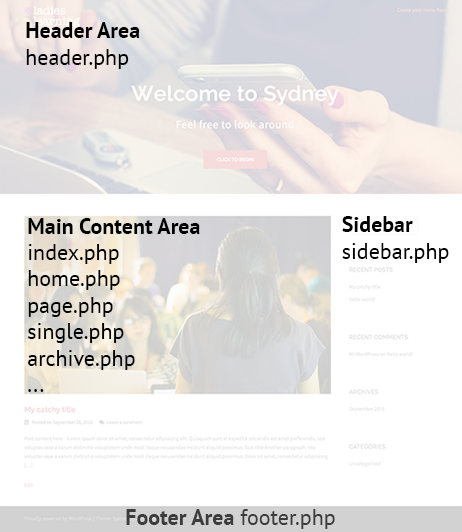
<style>
.page{position:relative;width:462px;height:532px;background:#ffffff}
.page>*{position:absolute;margin:0}
.t1{font:22px "PTSans-Bold";color:#000000}
.t2{font:22px "PTSans-Regular";color:#000000}
.t3{font:22px "PTSans-Bold";color:#3c3c3c}
.t4{font:22px "PTSans-Regular";color:#3c3c3c}
</style>
<div class="page">
<p class="t1" style="left:26px;top:22px;width:114px;height:47px">Header Area<br><span class="t2">header.php</span></p>
<p class="t2" style="left:28px;top:218px;width:172px;height:174px"><span class="t1">Main Content Area<br></span>index.php<br>home.php<br>page.php<br>single.php<br>archive.php<br>...</p>
<p class="t2" style="left:342px;top:216px;width:107px;height:47px"><span class="t1">Sidebar<br></span>sidebar.php</p>
<p class="t3" style="left:126px;top:509px;width:209px;height:20px">Footer Area<span class="t4"> footer.php</span></p>
</div>
